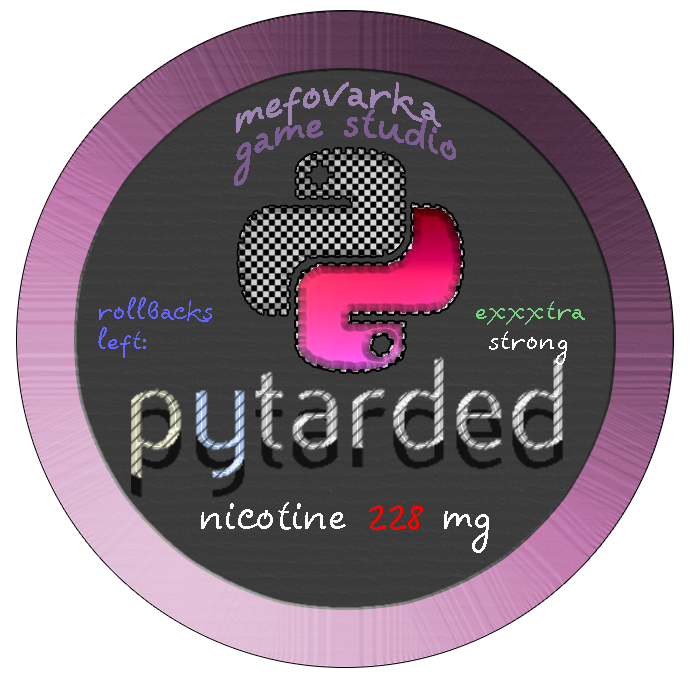
<style>
.page{position:relative;width:700px;height:700px;background:#ffffff}
.page>*{position:absolute;margin:0}
.t1{font:36px/30px "Veles-Regular";color:#7b5d92}
.t2{font:36px/30px "Veles-Regular";color:#9e85b1}
.t3{font:24px/30px "Veles-Regular";color:#6367ff}
.t4{font:24px/30px "Veles-Regular";color:#79d580}
.t5{font:24px/30px "Veles-Regular";color:#ffffff}
.t6{font:36px "Veles-Regular";color:#ffffff}
.t7{font:36px "Veles-Regular";color:#ff0000}
</style>
<div class="page">
<p class="t1" style="left:234px;top:82px;width:222px;height:104px;text-align:center"><span class="t2">mefovarka</span> <br>game studio</p>
<p class="t3" style="left:98px;top:297px;width:114px;height:61px">rollbacks <br>left:</p>
<p class="t4" style="left:476px;top:301px;width:109px;height:64px;text-align:center">exxxtra<br><span class="t5">strong</span></p>
<p class="t6" style="left:201px;top:502px;width:288px;height:51px">nicotine <span class="t7">228</span> mg</p>
</div>
